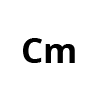
<style>
.page{position:relative;width:100px;height:100px;background:#ffffff}
.page>*{position:absolute;margin:0}
.t1{font:35px "OpenSans-Bold";color:#000000}
</style>
<div class="page">
<p class="t1" style="left:23px;top:38px;width:52px;height:25px">Cm</p>
</div>
